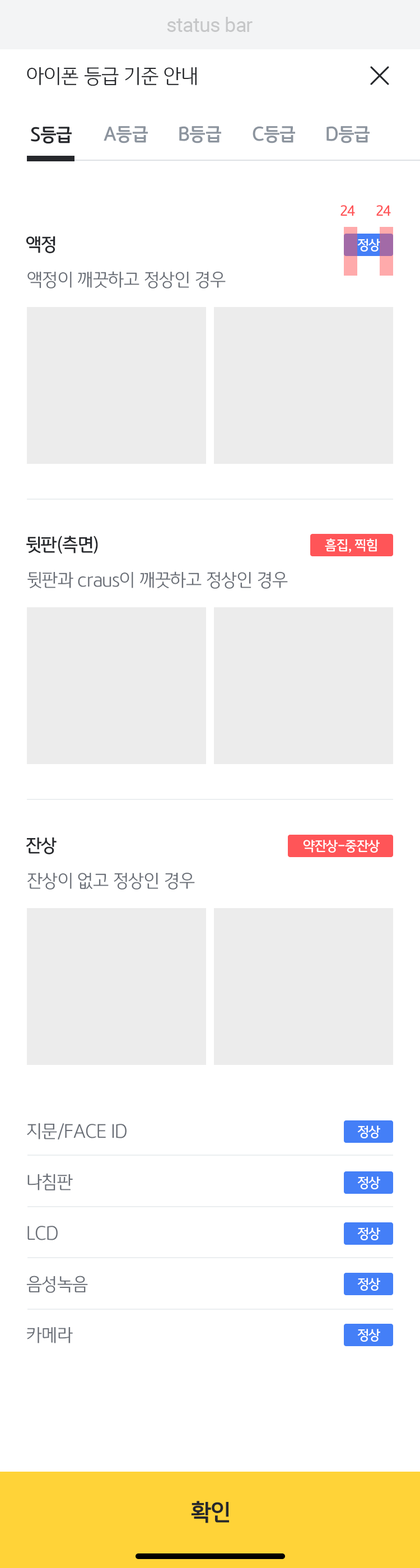
<style>
.page{position:relative;width:420px;height:1568px;background:#ffffff}
.page>*{position:absolute;margin:0}
.t1{font:20.2px "Roboto-Regular";letter-spacing:-0.02em;color:#c6c7c8}
.t2{font:20.2px "KBFGText-Light";letter-spacing:-0.02em;color:#26282c}
.t3{font:17.9px "KBFGText-Bold";letter-spacing:-0.02em;color:#26282c}
.t4{font:17.9px "KBFGText-Bold";letter-spacing:-0.02em;color:#8c949e}
.t5{font:13.4px "KBFGText-Medium";letter-spacing:-0.02em;color:#ff5558}
.t6{font:17.9px "KBFGText-Medium";letter-spacing:-0.02em;color:#26282c}
.t7{font:13.4px "KBFGText-Medium";letter-spacing:-0.02em;color:#ffffff}
.t8{font:17.9px "KBFGText-Light";letter-spacing:-0.02em;color:#696e76}
.t9{font:17.9px/51px "KBFGText-Light";letter-spacing:-0.02em;color:#696e76}
.t10{font:22.4px "KBFGText-Bold";letter-spacing:-0.02em;color:#26282c}
</style>
<div class="page">
<p class="t1" style="left:167px;top:17px;width:86px;height:15px">status bar</p>
<p class="t2" style="left:27px;top:67px;width:170px;height:19px">아이폰 등급 기준 안내</p>
<p class="t3" style="left:31px;top:127px;width:41px;height:17px">S등급</p>
<p class="t4" style="left:104px;top:126px;width:44px;height:17px">A등급</p>
<p class="t4" style="left:179px;top:126px;width:42px;height:17px">B등급</p>
<p class="t4" style="left:253px;top:126px;width:42px;height:17px">C등급</p>
<p class="t4" style="left:327px;top:126px;width:43px;height:17px">D등급</p>
<p class="t5" style="left:341px;top:205px;width:14px;height:11px">24</p>
<p class="t5" style="left:376px;top:205px;width:15px;height:11px">24</p>
<p class="t6" style="left:26px;top:236px;width:29px;height:17px">액정</p>
<p class="t7" style="left:357px;top:239px;width:23px;height:13px">정상</p>
<p class="t8" style="left:27px;top:271px;width:199px;height:18px">액정이 깨끗하고 정상인 경우</p>
<p class="t6" style="left:26px;top:536px;width:72px;height:18px">뒷판(측면)</p>
<p class="t7" style="left:325px;top:538px;width:52px;height:15px">흠집, 찍힘</p>
<p class="t8" style="left:27px;top:571px;width:261px;height:18px">뒷판과 craus이 깨끗하고 정상인 경우</p>
<p class="t6" style="left:26px;top:837px;width:31px;height:17px">잔상</p>
<p class="t7" style="left:303px;top:840px;width:77px;height:13px">약잔상-중잔상</p>
<p class="t8" style="left:27px;top:872px;width:168px;height:18px">잔상이 없고 정상인 경우</p>
<p class="t9" style="left:26px;top:1123px;width:101px;height:220px">지문/FACE ID<br>나침판<br>LCD<br>음성녹음<br>카메라</p>
<p class="t7" style="left:357px;top:1125px;width:23px;height:13px">정상</p>
<p class="t7" style="left:357px;top:1176px;width:23px;height:13px">정상</p>
<p class="t7" style="left:357px;top:1227px;width:23px;height:13px">정상</p>
<p class="t7" style="left:357px;top:1278px;width:23px;height:13px">정상</p>
<p class="t7" style="left:357px;top:1329px;width:23px;height:13px">정상</p>
<p class="t10" style="left:191px;top:1501px;width:39px;height:22px">확인</p>
</div>
